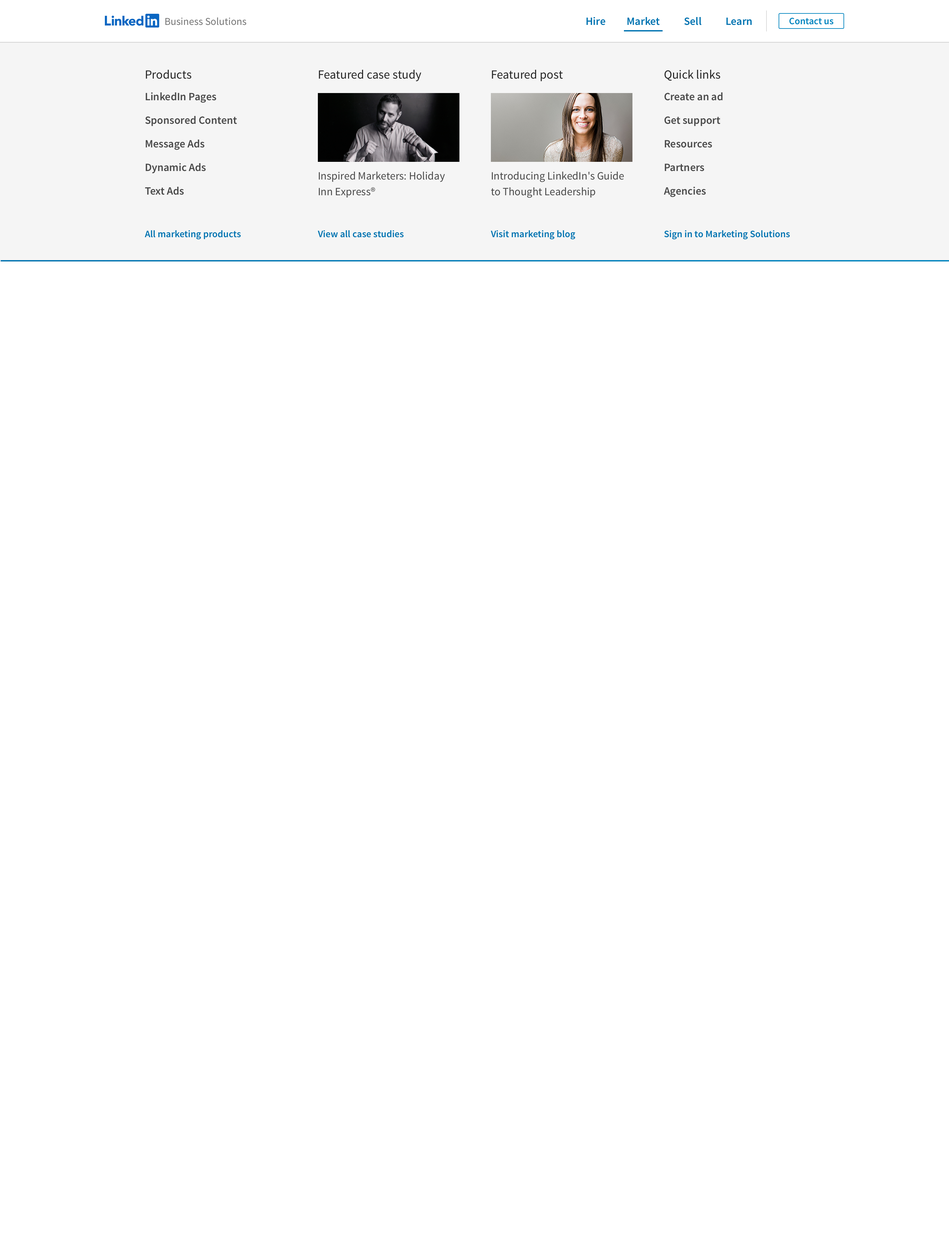
<style>
.page{position:relative;width:949px;height:1256px;background:#ffffff}
.page>*{position:absolute;margin:0}
.t1{font:10.5px "SourceSansPro-Regular"}
.t2{font:11.1px "SourceSansPro-SemiBold";color:#0073b1}
.t3{font:9.8px "SourceSansPro-SemiBold";color:#0084bf}
.t4{font:12.5px "SourceSansPro-Regular"}
.t5{font:11.1px "SourceSansPro-SemiBold"}
.t6{font:11.1px/15.7px "SourceSansPro-Regular"}
.t7{font:9.8px "Helvetica-Bold";color:#0073b1}
</style>
<div class="page">
<p class="t1" style="left:165px;top:17px;width:81px;height:8px">Business Solutions</p>
<p class="t2" style="left:586px;top:17px;width:19px;height:8px">Hire</p>
<p class="t2" style="left:627px;top:17px;width:33px;height:8px">Market</p>
<p class="t2" style="left:684px;top:17px;width:18px;height:8px">Sell</p>
<p class="t2" style="left:726px;top:17px;width:26px;height:8px">Learn</p>
<p class="t3" style="left:789px;top:18px;width:45px;height:7px">Contact us</p>
<p class="t4" style="left:146px;top:69px;width:45px;height:10px">Products</p>
<p class="t4" style="left:319px;top:69px;width:102px;height:12px">Featured case study</p>
<p class="t4" style="left:492px;top:69px;width:71px;height:12px">Featured post</p>
<p class="t4" style="left:664px;top:69px;width:56px;height:12px">Quick links</p>
<p class="t5" style="left:146px;top:92px;width:70px;height:11px">LinkedIn Pages</p>
<p class="t5" style="left:664px;top:92px;width:59px;height:9px">Create an ad</p>
<p class="t5" style="left:145px;top:116px;width:92px;height:10px">Sponsored Content</p>
<p class="t5" style="left:664px;top:116px;width:56px;height:10px">Get support</p>
<p class="t5" style="left:146px;top:140px;width:58px;height:10px">Message Ads</p>
<p class="t5" style="left:665px;top:140px;width:47px;height:8px">Resources</p>
<p class="t5" style="left:146px;top:163px;width:60px;height:10px">Dynamic Ads</p>
<p class="t6" style="left:319px;top:171px;width:126px;height:27px">Inspired Marketers: Holiday Inn Express®</p>
<p class="t6" style="left:491px;top:171px;width:133px;height:27px">Introducing LinkedIn's Guide to Thought Leadership</p>
<p class="t5" style="left:665px;top:164px;width:39px;height:7px">Partners</p>
<p class="t5" style="left:145px;top:187px;width:39px;height:8px">Text Ads</p>
<p class="t5" style="left:664px;top:186px;width:42px;height:11px">Agencies</p>
<p class="t7" style="left:145px;top:230px;width:96px;height:10px">All marketing products</p>
<p class="t7" style="left:318px;top:230px;width:86px;height:8px">View all case studies</p>
<p class="t7" style="left:491px;top:230px;width:84px;height:10px">Visit marketing blog</p>
<p class="t7" style="left:664px;top:230px;width:126px;height:10px">Sign in to Marketing Solutions</p>
</div>
